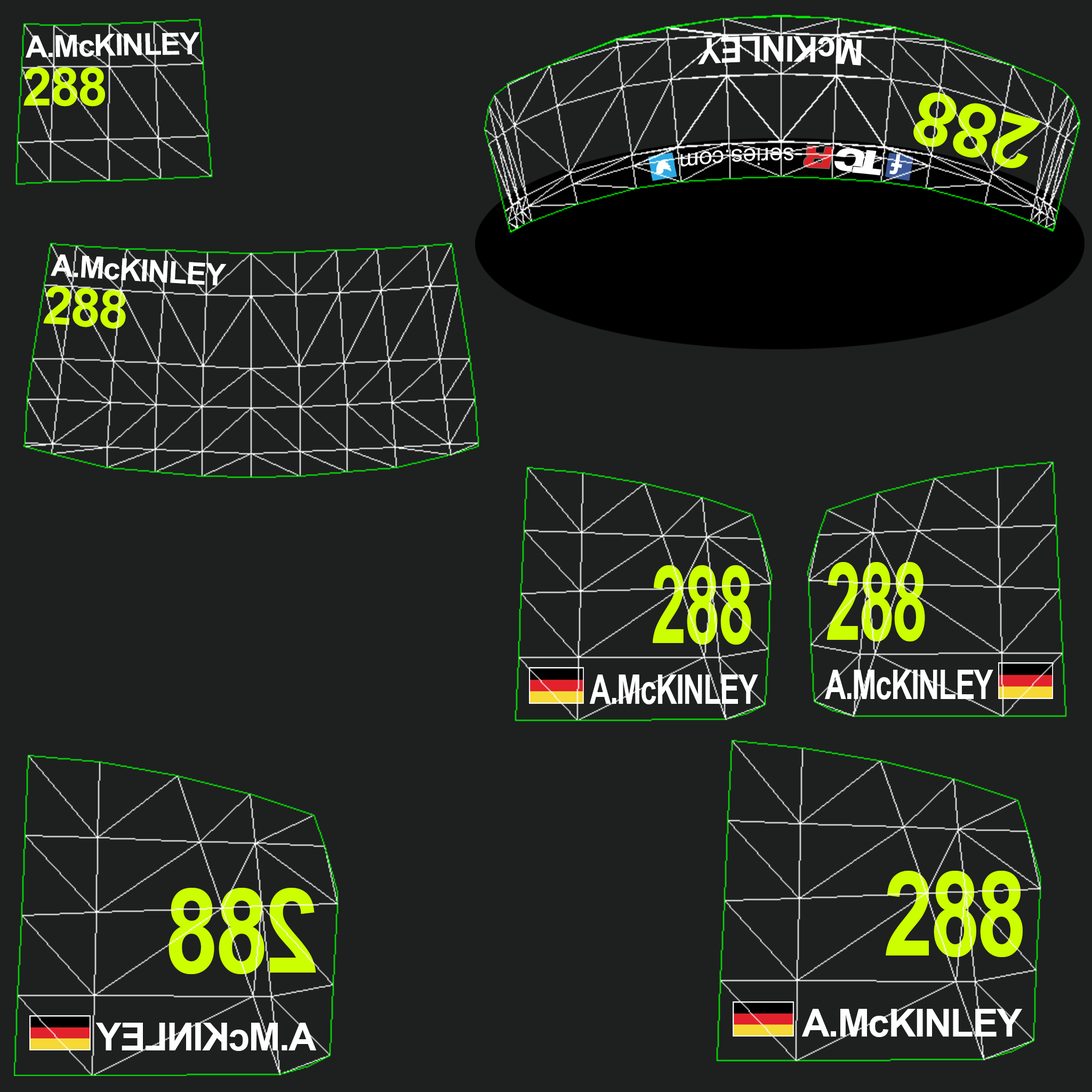
<style>
.page{position:relative;width:1092px;height:1092px;background:#1e1f1f}
.page>*{position:absolute;margin:0}
.t1{font:30.4px "Arial-BoldMT";letter-spacing:-0.035em;color:#ffffff}
.t2{font:34.6px "Arial-BoldMT";letter-spacing:-0.035em;color:#ffffff}
.t3{font:53.3px "Arial-BoldMT";letter-spacing:-0.035em;color:#ccff00}
.t4{font:74.6px "Arial-BoldMT";letter-spacing:-0.035em;color:#ccff00;scale:1.06 1}
.t5{font:107.9px "Arial-BoldMT";letter-spacing:-0.035em;color:#ccff00;scale:0.59 1}
.t6{font:40.9px "Arial-BoldMT";letter-spacing:-0.035em;color:#ffffff;scale:0.72 1}
.t7{font:117.5px "Arial-BoldMT";letter-spacing:-0.035em;color:#ccff00;scale:0.76 1}
.t8{font:117.5px "Arial-BoldMT";letter-spacing:-0.035em;color:#ccff00;scale:0.82 1}
.t9{font:38.4px "Arial-BoldMT";letter-spacing:-0.035em;color:#ffffff}
</style>
<div class="page">
<p class="t1" style="left:26px;top:32px;width:174px;height:26px;rotate:-1deg">A.McKINLEY</p>
<p class="t2" style="left:698px;top:36px;width:164px;height:30px;rotate:-180deg">McKINLEY</p>
<p class="t3" style="left:23px;top:67px;width:82px;height:40px">288</p>
<p class="t4" style="left:913px;top:92px;width:128px;height:76px;rotate:-165deg">288</p>
<p class="t1" style="left:51px;top:254px;width:176px;height:32px;rotate:3deg">A.McKINLEY</p>
<p class="t3" style="left:43px;top:286px;width:83px;height:43px;rotate:4deg">288</p>
<p class="t5" style="left:653px;top:565px;width:98px;height:80px">288</p>
<p class="t5" style="left:827px;top:562px;width:98px;height:79px">288</p>
<p class="t6" style="left:590px;top:674px;width:168px;height:30px">A.McKINLEY</p>
<p class="t6" style="left:825px;top:670px;width:168px;height:30px">A.McKINLEY</p>
<p class="t7" style="left:886px;top:871px;width:137px;height:86px">288</p>
<p class="t8" style="left:168px;top:888px;width:148px;height:86px;rotate:180deg">288</p>
<p class="t9" style="left:802px;top:1009px;width:220px;height:28px">A.McKINLEY</p>
<p class="t9" style="left:95px;top:1023px;width:221px;height:28px;rotate:180deg">A.McKINLEY</p>
</div>
